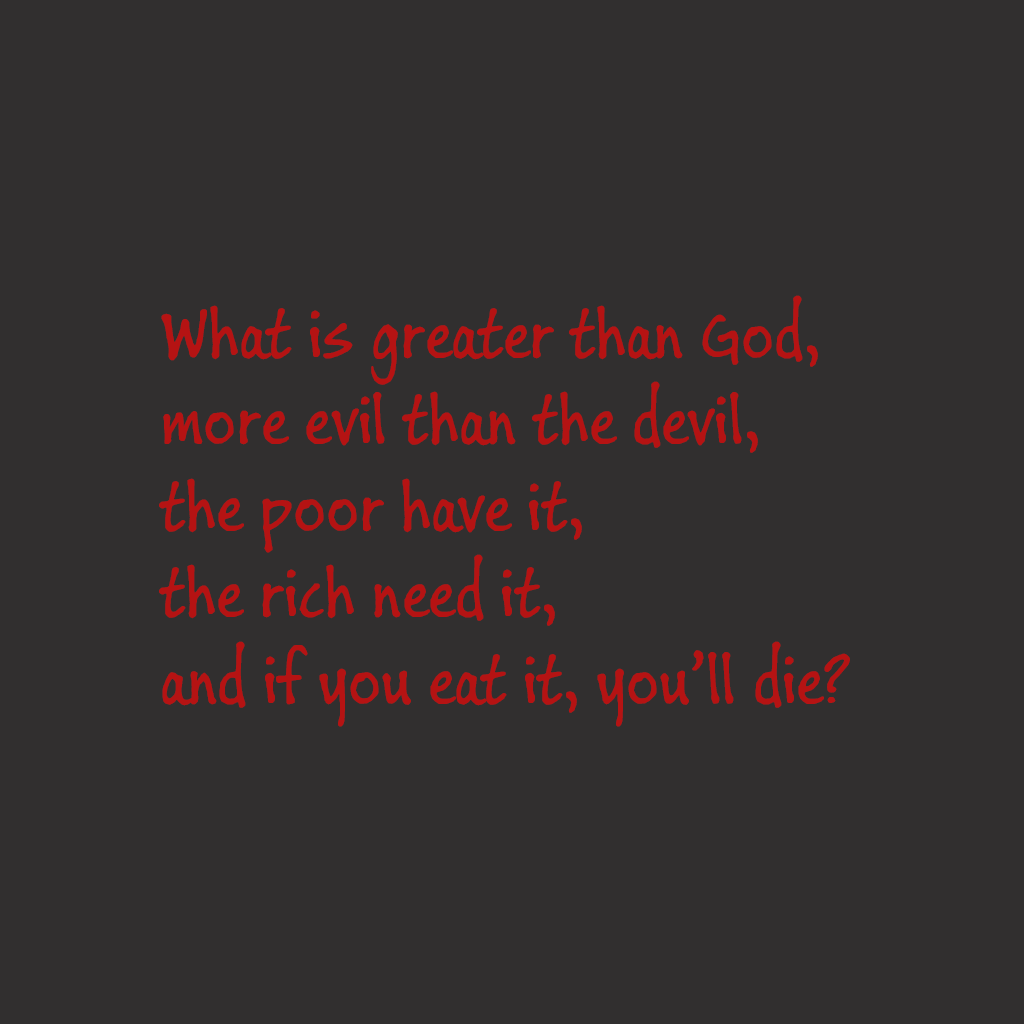
<style>
.page{position:relative;width:1024px;height:1024px;background:#312f2f}
.page>*{position:absolute;margin:0}
.t1{font:72px "BuxtonSketch";color:#b51313}
</style>
<div class="page">
<p class="t1" style="left:159px;top:295px;width:691px;height:432px;text-align:right">What is greater than God,<br>more evil than the devil,<br>the poor have it,<br>the rich need it,<br>and if you eat it, you’ll die?</p>
</div>
